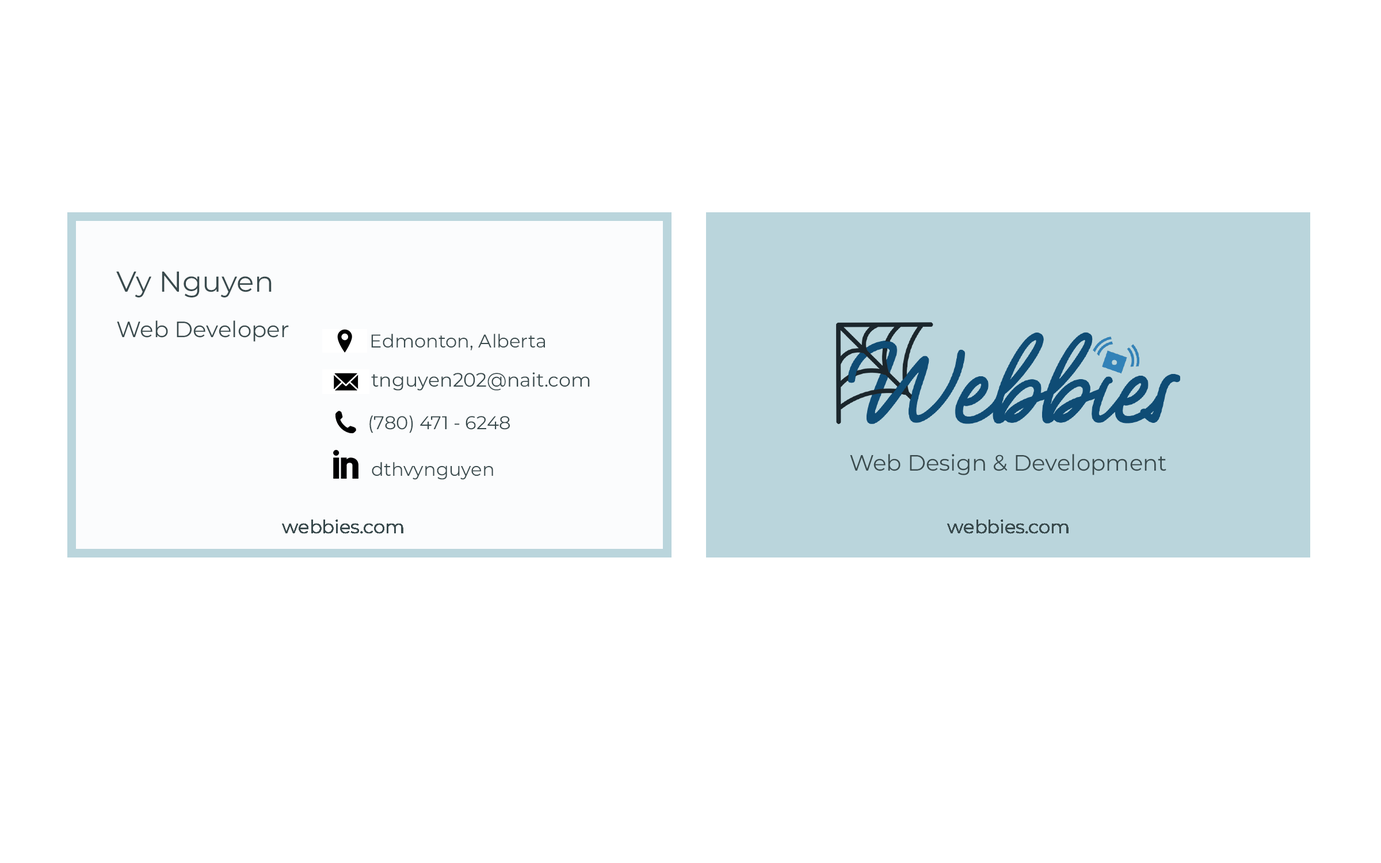
<style>
.page{position:relative;width:1381px;height:863px;background:#ffffff}
.page>*{position:absolute;margin:0}
.t1{font:22.3px/33.6px "Montserrat-Regular";color:#394a4d}
.t2{font:28.8px/33.6px "Montserrat-Regular";color:#394a4d}
.t3{font:18.5px "Montserrat-Regular";color:#394a4d}
.t4{font:19.2px "Montserrat-Regular";color:#394a4d}
.t5{font:22.3px "Montserrat-Regular";color:#394a4d}
</style>
<div class="page">
<p class="t1" style="left:116px;top:272px;width:173px;height:70px"><span class="t2">Vy Nguyen<br></span>Web Developer</p>
<p class="t3" style="left:371px;top:334px;width:174px;height:16px">Edmonton, Alberta</p>
<p class="t4" style="left:371px;top:372px;width:219px;height:19px">tnguyen202@nait.com</p>
<p class="t3" style="left:369px;top:416px;width:141px;height:17px">(780) 471 - 6248</p>
<p class="t5" style="left:850px;top:454px;width:317px;height:21px">Web Design &amp; Development</p>
<p class="t3" style="left:372px;top:462px;width:121px;height:18px">dthvynguyen</p>
<p class="t3" style="left:282px;top:520px;width:121px;height:14px">webbies.com</p>
<p class="t3" style="left:282px;top:520px;width:121px;height:14px">webbies.com</p>
<p class="t3" style="left:282px;top:520px;width:121px;height:14px">webbies.com</p>
<p class="t3" style="left:282px;top:520px;width:121px;height:14px">webbies.com</p>
<p class="t3" style="left:282px;top:520px;width:121px;height:14px">webbies.com</p>
<p class="t3" style="left:282px;top:520px;width:121px;height:14px">webbies.com</p>
<p class="t3" style="left:282px;top:520px;width:121px;height:14px">webbies.com</p>
<p class="t3" style="left:282px;top:520px;width:121px;height:14px">webbies.com</p>
<p class="t3" style="left:282px;top:520px;width:121px;height:14px">webbies.com</p>
<p class="t3" style="left:282px;top:520px;width:121px;height:14px">webbies.com</p>
<p class="t3" style="left:947px;top:520px;width:122px;height:14px">webbies.com</p>
<p class="t3" style="left:947px;top:520px;width:122px;height:14px">webbies.com</p>
<p class="t3" style="left:947px;top:520px;width:122px;height:14px">webbies.com</p>
<p class="t3" style="left:947px;top:520px;width:122px;height:14px">webbies.com</p>
<p class="t3" style="left:947px;top:520px;width:122px;height:14px">webbies.com</p>
<p class="t3" style="left:947px;top:520px;width:122px;height:14px">webbies.com</p>
<p class="t3" style="left:947px;top:520px;width:122px;height:14px">webbies.com</p>
<p class="t3" style="left:947px;top:520px;width:122px;height:14px">webbies.com</p>
<p class="t3" style="left:947px;top:520px;width:122px;height:14px">webbies.com</p>
<p class="t3" style="left:947px;top:520px;width:122px;height:14px">webbies.com</p>
<p class="t3" style="left:947px;top:520px;width:122px;height:14px">webbies.com</p>
<p class="t3" style="left:947px;top:520px;width:122px;height:14px">webbies.com</p>
<p class="t3" style="left:947px;top:520px;width:122px;height:14px">webbies.com</p>
<p class="t3" style="left:947px;top:520px;width:122px;height:14px">webbies.com</p>
<p class="t3" style="left:947px;top:520px;width:122px;height:14px">webbies.com</p>
<p class="t3" style="left:947px;top:520px;width:122px;height:14px">webbies.com</p>
<p class="t3" style="left:947px;top:520px;width:122px;height:14px">webbies.com</p>
<p class="t3" style="left:947px;top:520px;width:122px;height:14px">webbies.com</p>
<p class="t3" style="left:947px;top:520px;width:122px;height:14px">webbies.com</p>
</div>
